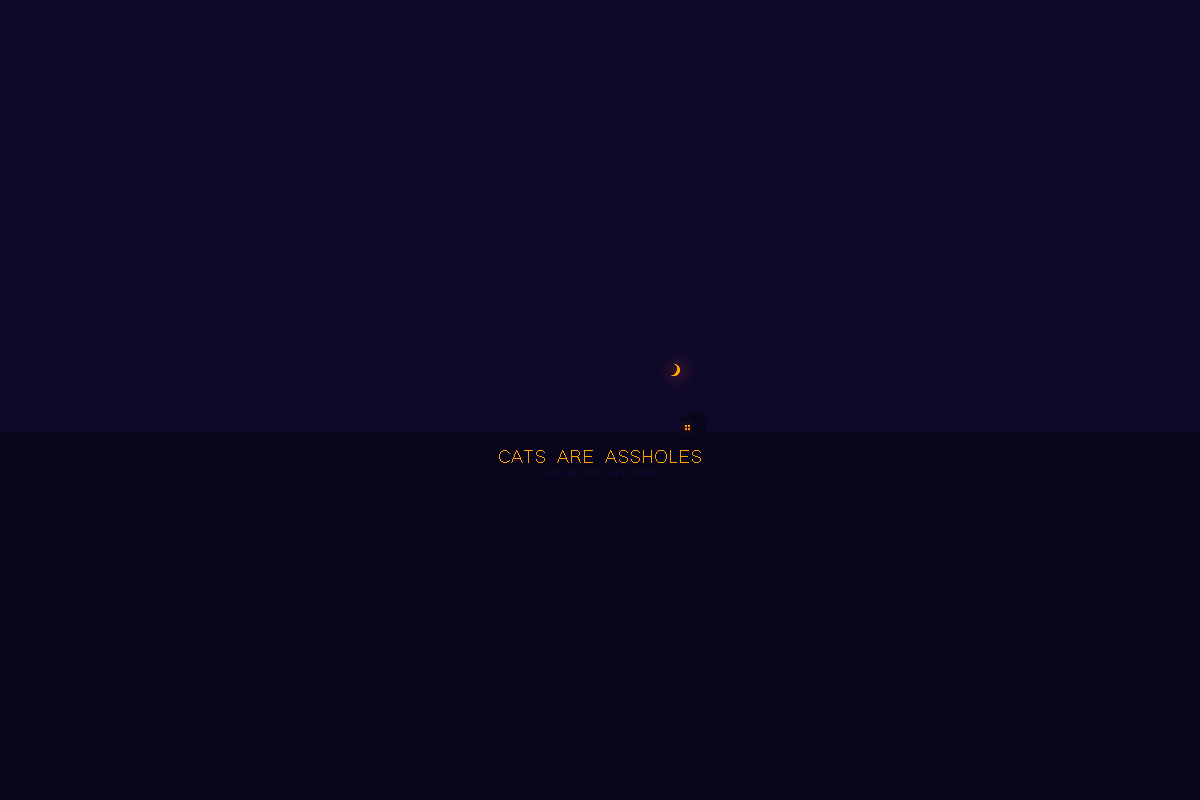
<style>
.page{position:relative;width:1200px;height:800px;background:#0e0829}
.page>*{position:absolute;margin:0}
.t1{font:24px "Microsoft-Yi-Baiti";color:#ffa200}
.t2{font:15px "Microsoft-Yi-Baiti";color:#190e4a}
</style>
<div class="page">
<p class="t1" style="left:499px;top:450px;width:202px;height:13px">CATS ARE ASSHOLES</p>
<p class="t2" style="left:543px;top:468px;width:114px;height:8px;opacity:0.5">but we still like them</p>
</div>
